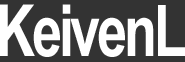
<style>
.page{position:relative;width:185px;height:62px;background:#333333}
.page>*{position:absolute;margin:0}
.t1{font:72px "Arial-BoldMT";letter-spacing:-0.06em;color:#ffffff;scale:0.75 1}
</style>
<div class="page">
<p class="t1" style="left:0px;top:4px;width:186px;height:53px">KeivenL</p>
</div>
